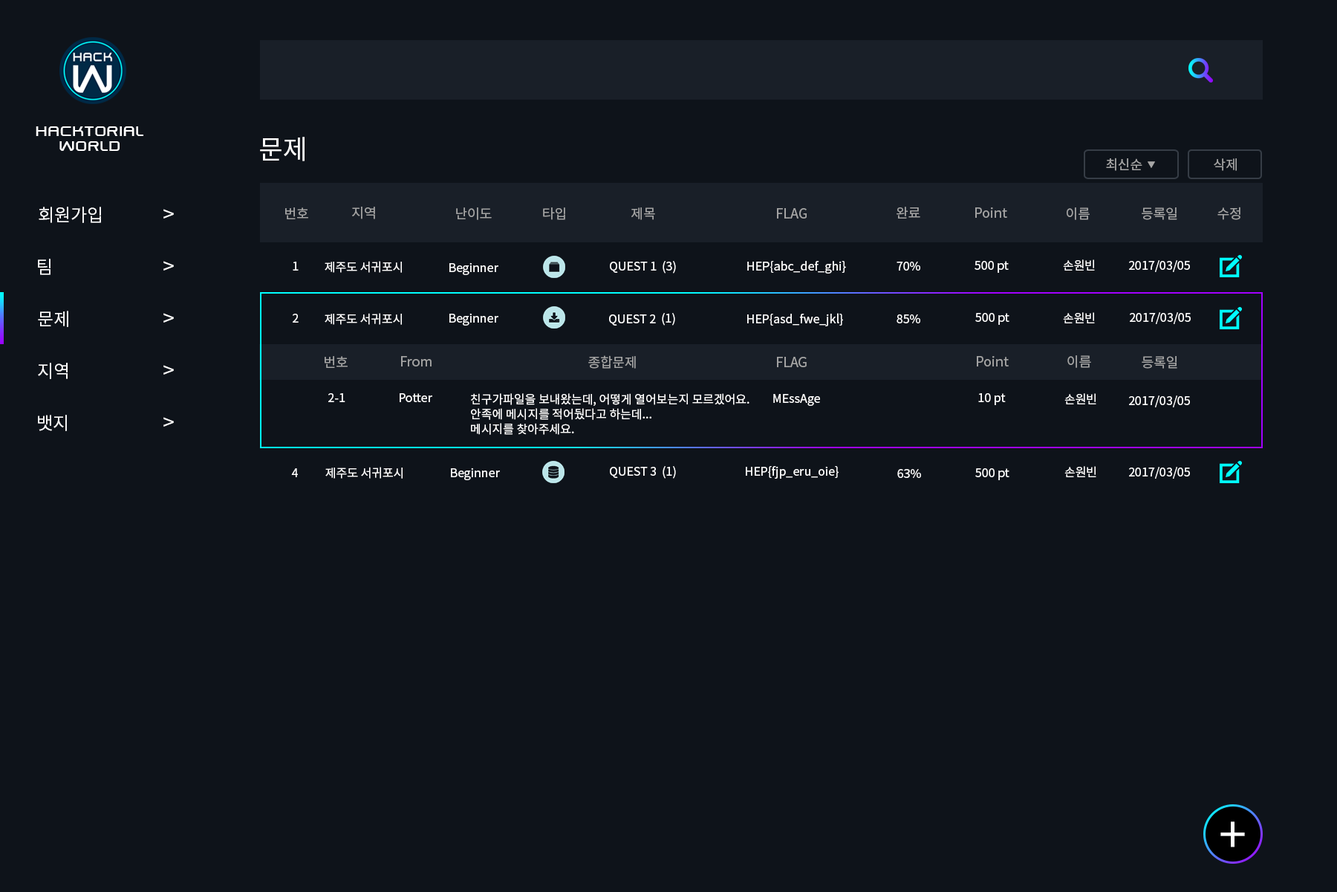
<style>
.page{position:relative;width:1337px;height:892px;background:#0e131a}
.page>*{position:absolute;margin:0}
.t1{font:17.8px/14.9px "SwiszRegular";color:#ffffff}
.t2{font:26.7px "NotoSansCJKkr-Regular";color:#ffffff}
.t3{font:13.4px "NotoSansCJKkr-Regular";color:#a6a6a6}
.t4{font:7.4px "NotoSansCJKkr-Regular";color:#a6a6a6}
.t5{font:13.4px "NotoSansCJKkr-Regular";color:#a3a3a3}
.t6{font:17.8px "NotoSansCJKkr-Regular";color:#ffffff}
.t7{font:20.8px "NotoSansCJKkr-Regular";color:#ffffff}
.t8{font:11.9px "NotoSansCJKkr-Regular";color:#ffffff}
.t9{font:11.9px/14.9px "NotoSansCJKkr-Regular";color:#ffffff}
.t10{font:49.8px "NotoSansCJKkr-Regular";color:#ffffff}
</style>
<div class="page">
<p class="t1" style="left:36px;top:126px;width:107px;height:25px;text-align:center">hacktorial<br>world</p>
<p class="t2" style="left:260px;top:137px;width:45px;height:24px">문제</p>
<p class="t3" style="left:1106px;top:158px;width:37px;height:13px">최신순</p>
<p class="t4" style="left:1148px;top:161px;width:7px;height:7px">▼</p>
<p class="t5" style="left:1214px;top:158px;width:23px;height:13px">삭제</p>
<p class="t6" style="left:39px;top:207px;width:62px;height:16px">회원가입</p>
<p class="t7" style="left:163px;top:209px;width:11px;height:9px">&gt;</p>
<p class="t5" style="left:285px;top:207px;width:23px;height:12px">번호</p>
<p class="t5" style="left:352px;top:207px;width:23px;height:12px">지역</p>
<p class="t5" style="left:456px;top:207px;width:36px;height:13px">난이도</p>
<p class="t5" style="left:543px;top:207px;width:22px;height:13px">타입</p>
<p class="t5" style="left:632px;top:207px;width:23px;height:13px">제목</p>
<p class="t5" style="left:777px;top:208px;width:30px;height:10px">FLAG</p>
<p class="t5" style="left:897px;top:207px;width:24px;height:11px">완료</p>
<p class="t5" style="left:976px;top:207px;width:32px;height:11px">Point</p>
<p class="t5" style="left:1067px;top:207px;width:23px;height:13px">이름</p>
<p class="t5" style="left:1142px;top:207px;width:36px;height:13px">등록일</p>
<p class="t5" style="left:1218px;top:207px;width:23px;height:13px">수정</p>
<p class="t6" style="left:38px;top:259px;width:13px;height:16px">팀</p>
<p class="t7" style="left:163px;top:261px;width:11px;height:9px">&gt;</p>
<p class="t8" style="left:293px;top:262px;width:6px;height:8px">1</p>
<p class="t8" style="left:325px;top:261px;width:77px;height:12px">제주도 서귀포시</p>
<p class="t8" style="left:450px;top:262px;width:49px;height:13px">Beginner</p>
<p class="t8" style="left:610px;top:262px;width:47px;height:11px">QUEST 1</p>
<p class="t8" style="left:663px;top:261px;width:13px;height:12px">(3)</p>
<p class="t8" style="left:747px;top:261px;width:99px;height:12px">HEP{abc_def_ghi}</p>
<p class="t8" style="left:897px;top:262px;width:24px;height:8px">70%</p>
<p class="t8" style="left:975px;top:261px;width:34px;height:12px">500 pt</p>
<p class="t8" style="left:1063px;top:259px;width:32px;height:11px">손원빈</p>
<p class="t8" style="left:1129px;top:260px;width:61px;height:12px">2017/03/05</p>
<p class="t6" style="left:38px;top:311px;width:30px;height:16px">문제</p>
<p class="t7" style="left:163px;top:313px;width:11px;height:9px">&gt;</p>
<p class="t8" style="left:293px;top:314px;width:6px;height:8px">2</p>
<p class="t8" style="left:325px;top:313px;width:77px;height:12px">제주도 서귀포시</p>
<p class="t8" style="left:450px;top:313px;width:49px;height:12px">Beginner</p>
<p class="t8" style="left:609px;top:314px;width:47px;height:11px">QUEST 2</p>
<p class="t8" style="left:662px;top:313px;width:13px;height:12px">(1)</p>
<p class="t8" style="left:747px;top:313px;width:96px;height:13px">HEP{asd_fwe_jkl}</p>
<p class="t8" style="left:897px;top:314px;width:24px;height:9px">85%</p>
<p class="t8" style="left:976px;top:313px;width:34px;height:12px">500 pt</p>
<p class="t8" style="left:1063px;top:312px;width:32px;height:11px">손원빈</p>
<p class="t8" style="left:1130px;top:312px;width:61px;height:12px">2017/03/05</p>
<p class="t6" style="left:38px;top:363px;width:30px;height:16px">지역</p>
<p class="t7" style="left:163px;top:365px;width:11px;height:9px">&gt;</p>
<p class="t5" style="left:325px;top:356px;width:23px;height:12px">번호</p>
<p class="t5" style="left:401px;top:356px;width:31px;height:10px">From</p>
<p class="t5" style="left:588px;top:355px;width:48px;height:14px">종합문제</p>
<p class="t5" style="left:777px;top:357px;width:30px;height:10px">FLAG</p>
<p class="t5" style="left:977px;top:356px;width:32px;height:10px">Point</p>
<p class="t5" style="left:1068px;top:355px;width:23px;height:13px">이름</p>
<p class="t5" style="left:1142px;top:356px;width:36px;height:13px">등록일</p>
<p class="t8" style="left:328px;top:393px;width:17px;height:9px">2-1</p>
<p class="t8" style="left:400px;top:393px;width:32px;height:9px">Potter</p>
<p class="t9" style="left:471px;top:393px;width:279px;height:42px">친구가파일을 보내왔는데, 어떻게 열어보는지 모르겠어요.<br>안족에 메시지를 적어뒀다고 하는데...<br>메시지를 찾아주세요.</p>
<p class="t8" style="left:773px;top:394px;width:47px;height:12px">MEssAge</p>
<p class="t8" style="left:979px;top:393px;width:27px;height:12px">10 pt</p>
<p class="t8" style="left:1065px;top:393px;width:32px;height:11px">손원빈</p>
<p class="t8" style="left:1129px;top:395px;width:61px;height:12px">2017/03/05</p>
<p class="t6" style="left:38px;top:415px;width:29px;height:16px">뱃지</p>
<p class="t7" style="left:163px;top:417px;width:11px;height:9px">&gt;</p>
<p class="t8" style="left:291px;top:468px;width:7px;height:9px">4</p>
<p class="t8" style="left:325px;top:467px;width:78px;height:11px">제주도 서귀포시</p>
<p class="t8" style="left:451px;top:467px;width:49px;height:13px">Beginner</p>
<p class="t8" style="left:610px;top:467px;width:46px;height:11px">QUEST 3</p>
<p class="t8" style="left:663px;top:466px;width:13px;height:12px">(1)</p>
<p class="t8" style="left:746px;top:466px;width:93px;height:12px">HEP{fjp_eru_oie}</p>
<p class="t8" style="left:898px;top:469px;width:23px;height:9px">63%</p>
<p class="t8" style="left:976px;top:468px;width:34px;height:12px">500 pt</p>
<p class="t8" style="left:1065px;top:466px;width:32px;height:11px">손원빈</p>
<p class="t8" style="left:1129px;top:467px;width:61px;height:11px">2017/03/05</p>
<p class="t10" style="left:1221px;top:821px;width:24px;height:26px">+</p>
</div>
